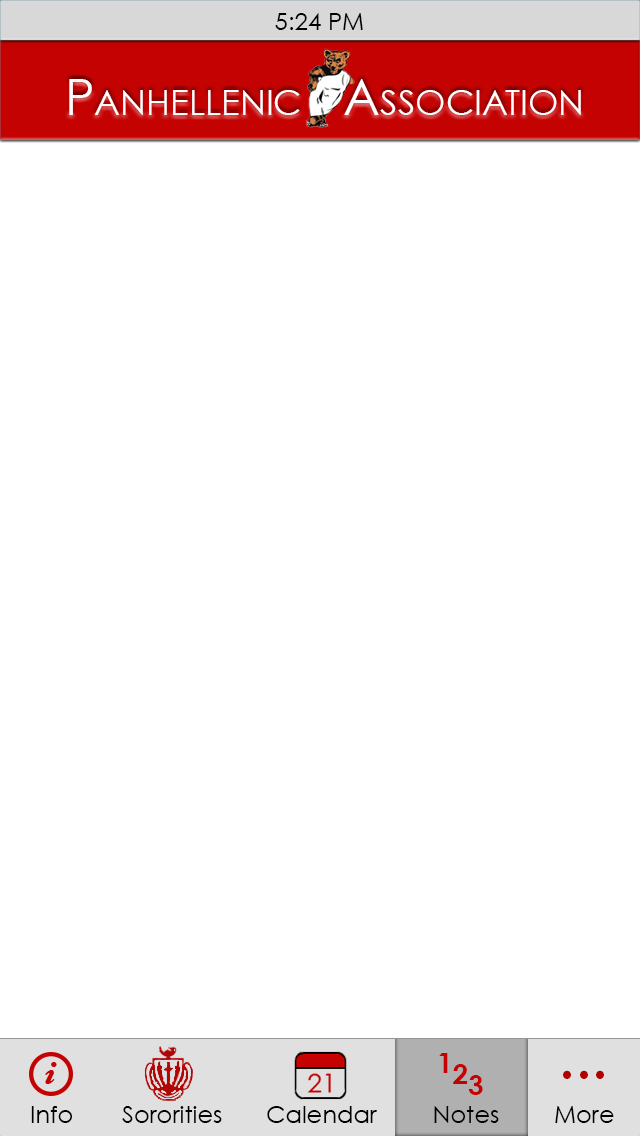
<style>
.page{position:relative;width:640px;height:1136px;background:#ffffff}
.page>*{position:absolute;margin:0}
.t1{font:50px "CenturyGothic";color:#ffffff;font-variant:small-caps}
.t2{font:50px "CenturyGothic";color:#ffffff}
.t3{font:28px/11px "CenturyGothic-Bold";color:#c40202}
.t4{font:72px "MinionPro-Regular";color:#b00000}
.t5{font:24px "CenturyGothic";color:#000000}
</style>
<div class="page">
<p class="t1" style="left:69px;top:79px;width:512px;height:36px"><span class="t2"> P</span>anhellenic   Association</p>
<p class="t3" style="left:439px;top:1053px;width:44px;height:42px">1<br>  2<br>    3</p>
<p class="t4" style="left:563px;top:1070px;width:41px;height:9px">...</p>
<p class="t5" style="left:31px;top:1106px;width:583px;height:17px">Info    Sororities    Calendar   Notes    More</p>
</div>
